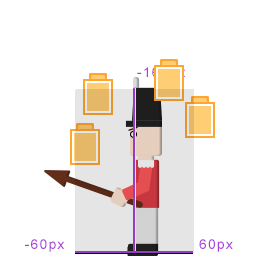
<style>
.page{position:relative;width:256px;height:256px;background:#ffffff}
.page>*{position:absolute;margin:0}
.t1{font:14px "ArialMT";letter-spacing:0.08em}
.t2{font:14px "ArialMT";letter-spacing:0.08em;color:#a941d9}
</style>
<div class="page">
<p class="t1" style="left:137px;top:67px;width:49px;height:13px">-160px</p>
<p class="t2" style="left:25px;top:239px;width:40px;height:13px">-60px</p>
<p class="t2" style="left:199px;top:239px;width:34px;height:13px">60px</p>
</div>
